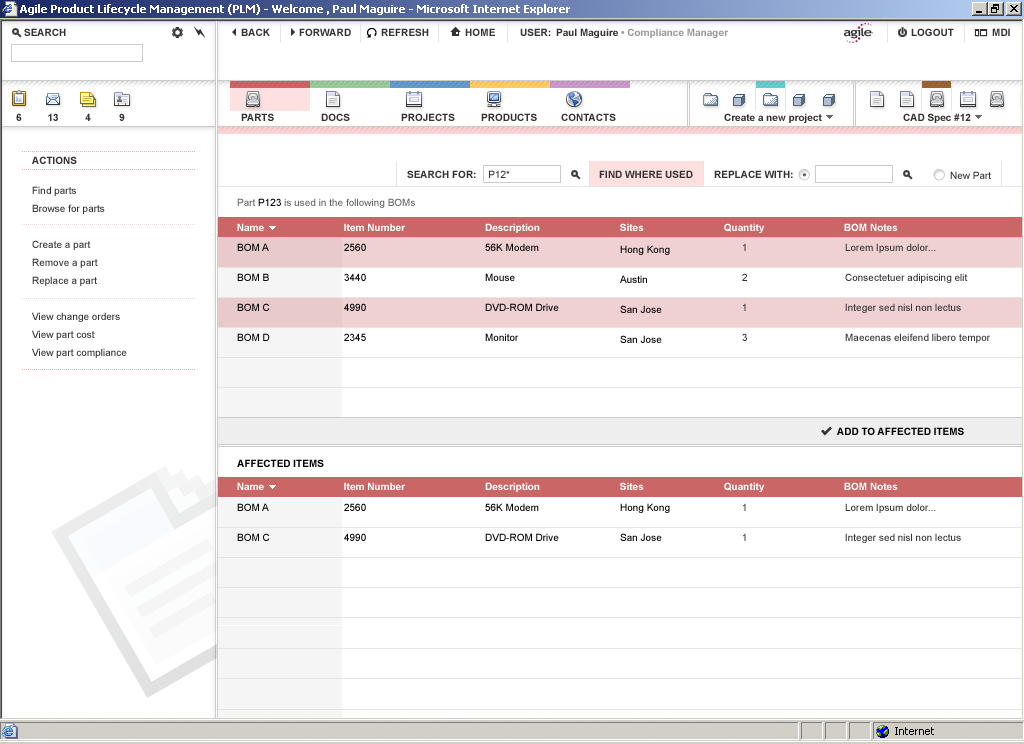
<style>
.page{position:relative;width:1024px;height:744px;background:#ffffff}
.page>*{position:absolute;margin:0}
.t1{font:10px "Arial-BoldMT";color:#333333}
.t2{font:10px "ArialMT";color:#333333}
.t3{font:10px/18px "ArialMT";color:#333333}
.t4{font:10px "ArialMT";color:#666666}
.t5{font:10px "ArialMT";color:#000000}
.t6{font:10px "Arial-BoldMT";color:#ffffff}
.t7{font:10px/10px "ArialMT";color:#000000}
.t8{font:10px/10px "ArialMT";color:#333333}
.t9{font:10px "Arial-BoldMT";color:#000000}
.t10{font:10px/10px "ArialMT"}
</style>
<div class="page">
<p class="t1" style="left:32px;top:156px;width:45px;height:8px">ACTIONS</p>
<p class="t1" style="left:407px;top:170px;width:69px;height:8px">SEARCH FOR:</p>
<p class="t2" style="left:489px;top:170px;width:21px;height:8px">P12*</p>
<p class="t1" style="left:599px;top:170px;width:94px;height:8px">FIND WHERE USED</p>
<p class="t1" style="left:714px;top:170px;width:79px;height:8px">REPLACE WITH:</p>
<p class="t2" style="left:950px;top:171px;width:41px;height:8px">New Part</p>
<p class="t3" style="left:32px;top:186px;width:95px;height:172px">Find parts<br>Browse for parts<br><br>Create a part<br>Remove a part<br>Replace a part<br><br>View change orders<br>View part cost<br>View part compliance</p>
<p class="t4" style="left:237px;top:198px;width:178px;height:10px">Part <span class="t5">P123 </span>is used in the following BOMs</p>
<p class="t6" style="left:237px;top:223px;width:27px;height:8px">Name</p>
<p class="t6" style="left:344px;top:223px;width:62px;height:8px">Item Number</p>
<p class="t6" style="left:485px;top:223px;width:55px;height:10px">Description</p>
<p class="t6" style="left:620px;top:223px;width:24px;height:8px">Sites</p>
<p class="t6" style="left:724px;top:223px;width:41px;height:10px">Quantity</p>
<p class="t6" style="left:844px;top:223px;width:54px;height:8px">BOM Notes</p>
<p class="t7" style="left:237px;top:243px;width:33px;height:98px">BOM A<br><br><br>BOM B<br><br><br>BOM C<br><br><br>BOM D</p>
<p class="t7" style="left:344px;top:243px;width:22px;height:98px">2560<br><br><br>3440<br><br><br>4990<br><br><br>2345</p>
<p class="t7" style="left:485px;top:243px;width:74px;height:98px">56K Modem<br><br><br>Mouse<br><br><br>DVD-ROM Drive<br><br><br>Monitor</p>
<p class="t7" style="left:620px;top:245px;width:50px;height:98px">Hong Kong<br><br><br>Austin<br><br><br>San Jose<br><br><br>San Jose</p>
<p class="t8" style="left:742px;top:243px;width:5px;height:98px">1<br><br><br>2<br><br><br>1<br><br><br>3</p>
<p class="t8" style="left:845px;top:243px;width:145px;height:100px">Lorem Ipsum dolor...<br><br><br>Consectetuer adipiscing elit<br><br><br>Integer sed nisl non lectus<br><br><br>Maecenas eleifend libero tempor</p>
<p class="t9" style="left:837px;top:427px;width:127px;height:8px">ADD TO AFFECTED ITEMS</p>
<p class="t9" style="left:237px;top:459px;width:87px;height:8px">AFFECTED ITEMS</p>
<p class="t6" style="left:237px;top:482px;width:27px;height:8px">Name</p>
<p class="t6" style="left:344px;top:482px;width:62px;height:8px">Item Number</p>
<p class="t6" style="left:485px;top:482px;width:55px;height:10px">Description</p>
<p class="t6" style="left:620px;top:482px;width:24px;height:8px">Sites</p>
<p class="t6" style="left:724px;top:482px;width:41px;height:10px">Quantity</p>
<p class="t6" style="left:844px;top:482px;width:54px;height:8px">BOM Notes</p>
<p class="t7" style="left:237px;top:503px;width:33px;height:38px">BOM A<br><br><br>BOM C</p>
<p class="t7" style="left:344px;top:503px;width:22px;height:38px">2560<br><br><br>4990</p>
<p class="t7" style="left:485px;top:503px;width:74px;height:38px">56K Modem<br><br><br>DVD-ROM Drive</p>
<p class="t7" style="left:620px;top:503px;width:50px;height:38px">Hong Kong<br><br><br>San Jose</p>
<p class="t10" style="left:743px;top:503px;width:3px;height:38px">1<br><br><br>1</p>
<p class="t8" style="left:845px;top:503px;width:116px;height:40px">Lorem Ipsum dolor...<br><br><br>Integer sed nisl non lectus</p>
</div>
